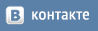
<style>
.page{position:relative;width:98px;height:31px;background:#5c81a9}
.page>*{position:absolute;margin:0}
.t1{font:15.7px "PTSans-Narrow";letter-spacing:0.025em;color:#ffffff;scale:1.15 1}
</style>
<div class="page">
<p class="t1" style="left:32px;top:11px;width:57px;height:9px">контакте</p>
</div>
